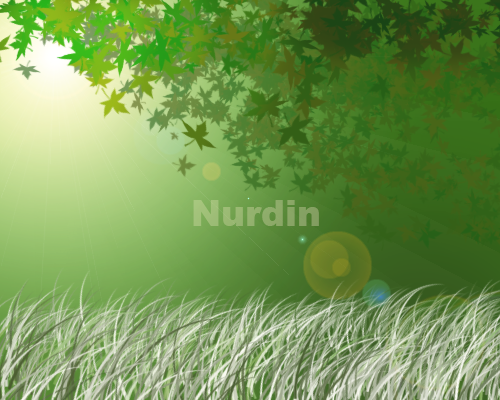
<style>
.page{position:relative;width:500px;height:400px}
.page>*{position:absolute;margin:0}
.t1{font:36px "Arial-Black";color:#93b26e}
</style>
<div class="page">
<p class="t1" style="left:193px;top:200px;width:126px;height:26px">Nurdin</p>
</div>
